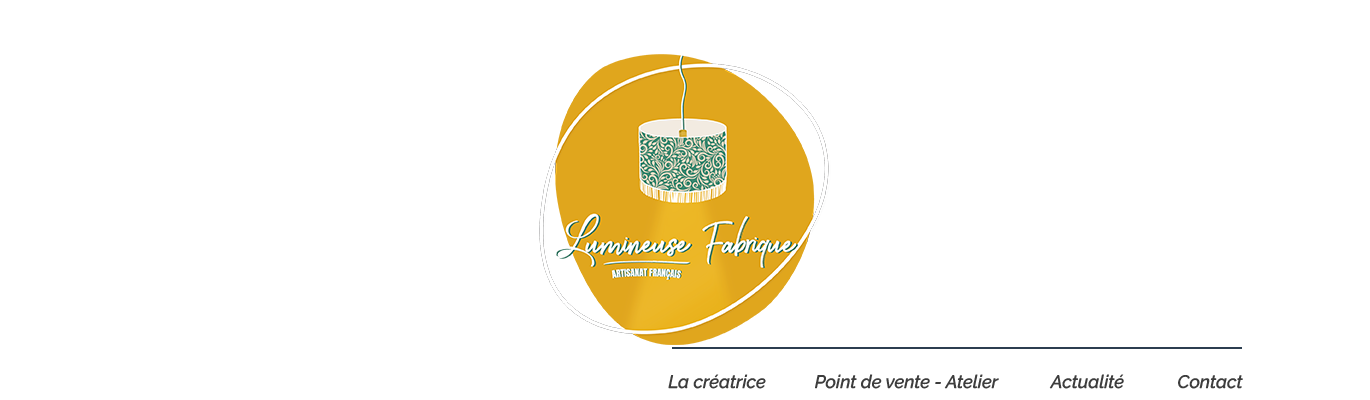
<style>
.page{position:relative;width:1370px;height:400px;background:#ffffff}
.page>*{position:absolute;margin:0}
.t1{font:18px "RalewayItalic-MediumItalic";color:#3d3d3d}
</style>
<div class="page">
<p class="t1" style="left:668px;top:374px;width:575px;height:15px">La créatrice           Point de vente - Atelier            Actualité            Contact</p>
</div>
